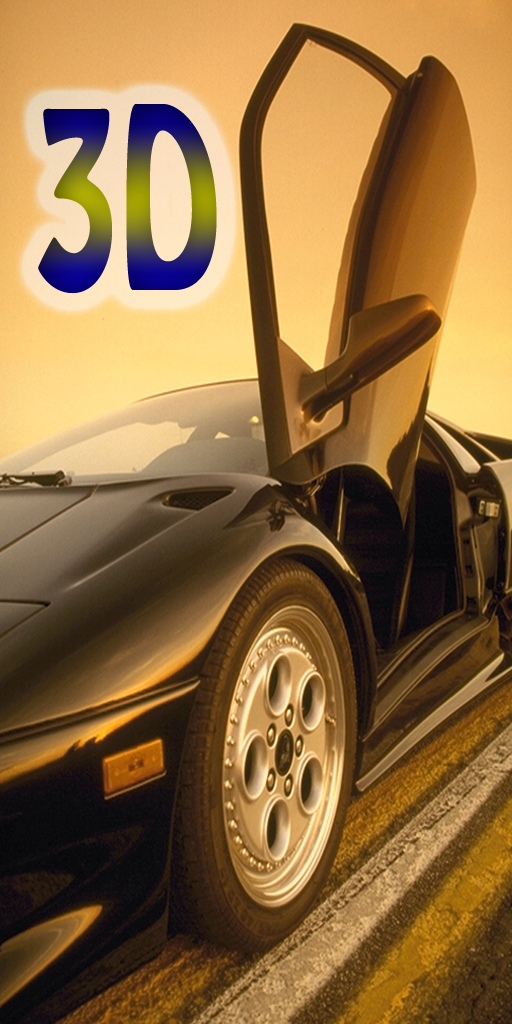
<style>
.page{position:relative;width:512px;height:1024px}
.page>*{position:absolute;margin:0}
.t1{font:223px "HoboStd";scale:0.68 1}
</style>
<div class="page">
<p class="t1" style="left:38px;top:104px;width:179px;height:190px">3D</p>
</div>
